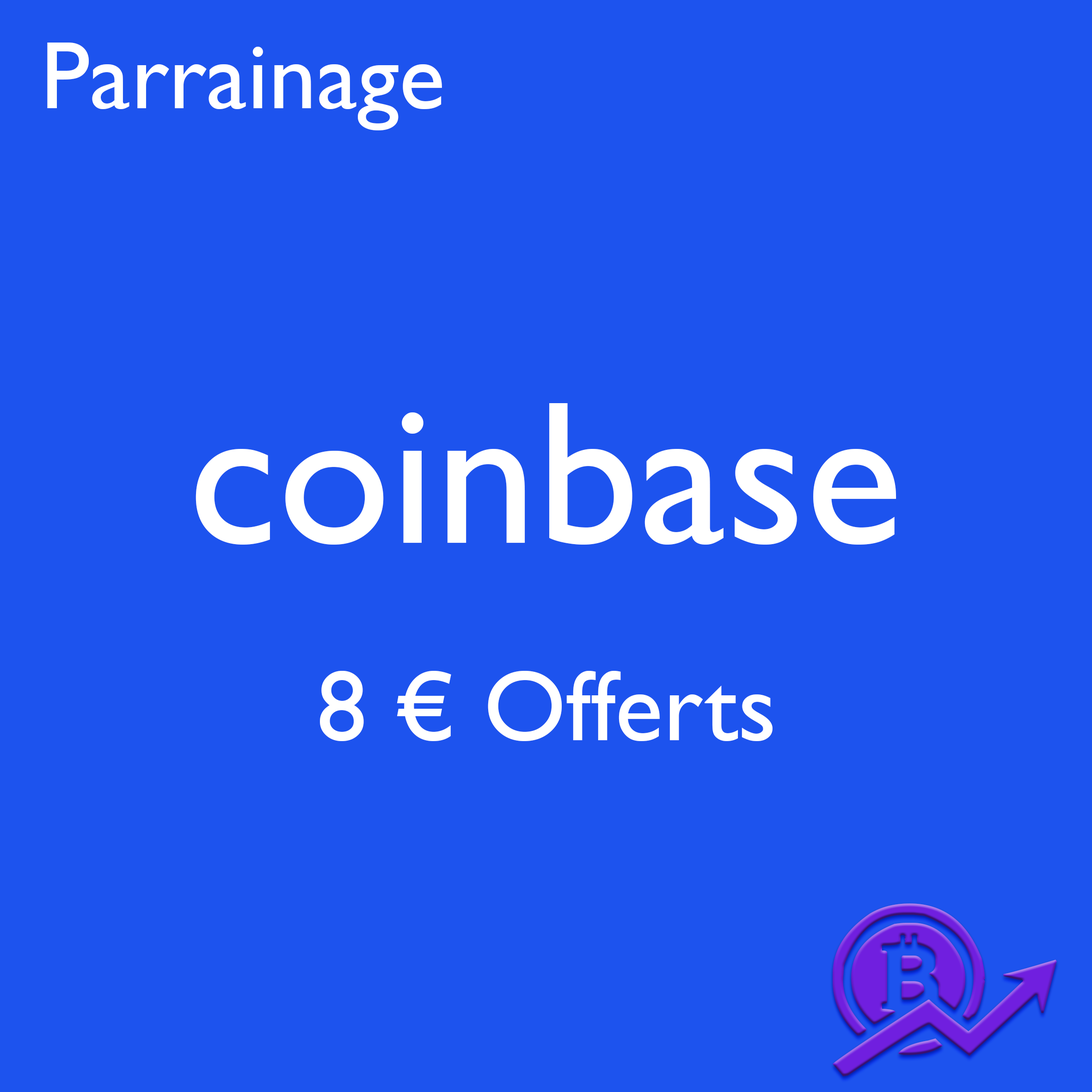
<style>
.page{position:relative;width:1092px;height:1092px;background:#1d53ee}
.page>*{position:absolute;margin:0}
.t1{font:96.3px "GillSansMT";color:#ffffff}
.t2{font:204.2px "GillSansMT";color:#ffffff}
.t3{font:100.2px "GillSansMT";color:#ffffff}
.t4{font:246.4px "Bitcoin";color:#701fdf}
</style>
<div class="page">
<p class="t1" style="left:47px;top:43px;width:395px;height:87px">Parrainage</p>
<p class="t2" style="left:196px;top:403px;width:700px;height:142px">coinbase</p>
<p class="t3" style="left:320px;top:671px;width:453px;height:70px">8 € Offerts</p>
<p class="t4" style="left:833px;top:903px;width:224px;height:173px">?</p>
</div>
